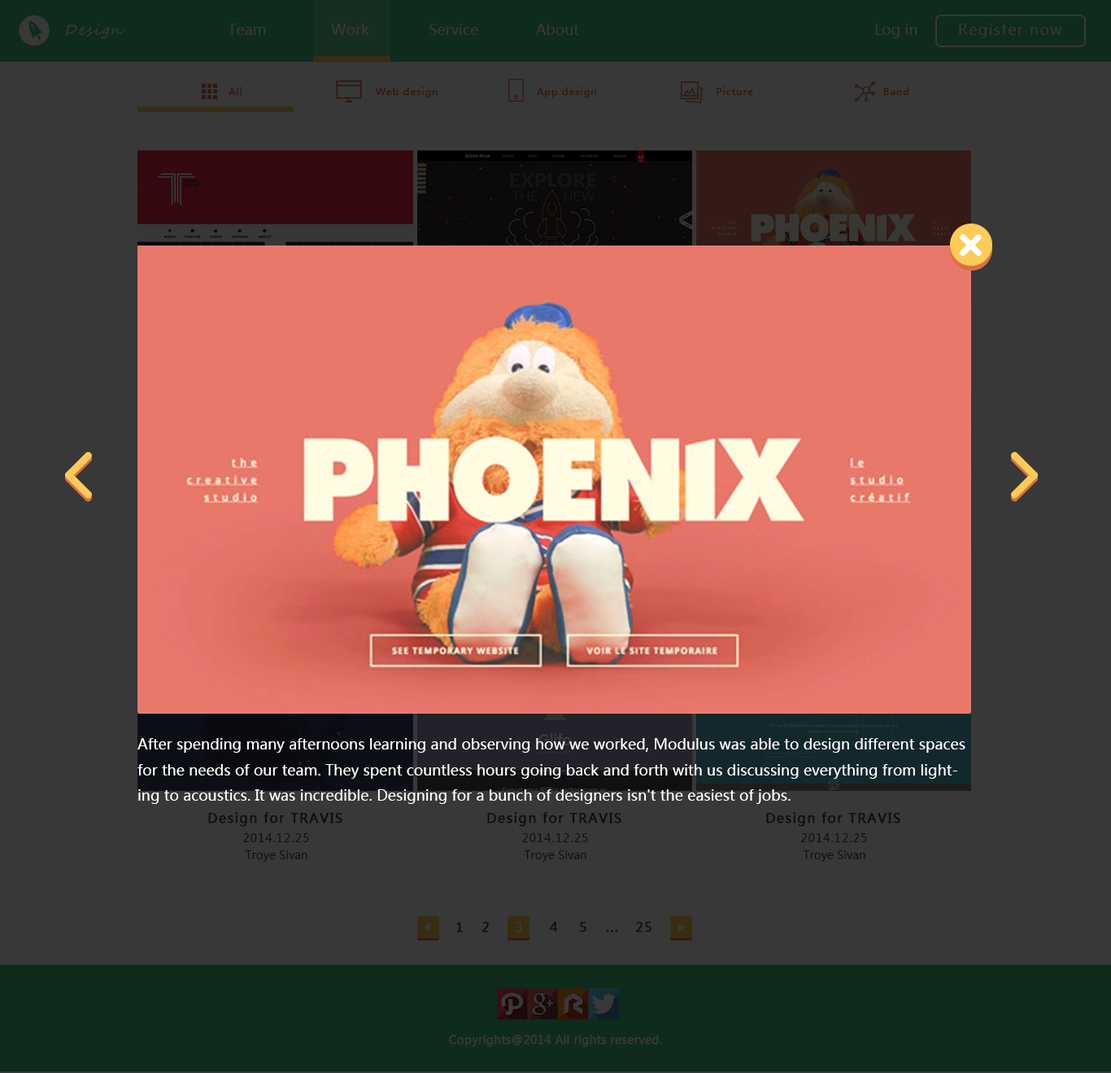
<style>
.page{position:relative;width:1111px;height:1073px;background:#383838}
.page>*{position:absolute;margin:0}
.t1{font:14.6px "SegoeScript";letter-spacing:0.075em;color:#383638;font-style:italic}
.t2{font:14.6px "MicrosoftYaHei";color:#383838}
.t3{font:14.6px "MicrosoftYaHei";letter-spacing:0.075em;color:#383638}
.t4{font:9.8px "MicrosoftYaHei";letter-spacing:0.075em;color:#30160b}
.t5{font:14.6px "MicrosoftYaHei";color:#ffffff}
.t6{font:13px "MicrosoftYaHei";letter-spacing:0.075em;color:#0f0e0e;font-weight:bold}
.t7{font:11.4px "MicrosoftYaHei";letter-spacing:0.075em;color:#0f0e0e}
.t8{font:11.4px "MicrosoftYaHei";color:#0f0e0d}
.t9{font:13px "MicrosoftYaHei";letter-spacing:0.075em;color:#101011;font-weight:bold}
.t10{font:13px "MicrosoftYaHei";letter-spacing:0.075em;color:#383838;font-weight:bold}
.t11{font:11.4px "MicrosoftYaHei";color:#383838;font-weight:bold}
</style>
<div class="page">
<p class="t1" style="left:65px;top:24px;width:59px;height:15px">Design</p>
<p class="t2" style="left:228px;top:24px;width:38px;height:11px">Team</p>
<p class="t2" style="left:331px;top:24px;width:38px;height:11px">Work</p>
<p class="t2" style="left:429px;top:24px;width:49px;height:11px">Service</p>
<p class="t2" style="left:536px;top:24px;width:43px;height:11px">About</p>
<p class="t2" style="left:875px;top:24px;width:42px;height:14px">Log in</p>
<p class="t3" style="left:959px;top:24px;width:103px;height:14px">Register now</p>
<p class="t4" style="left:229px;top:87px;width:13px;height:8px">All</p>
<p class="t4" style="left:376px;top:87px;width:62px;height:11px">Web design</p>
<p class="t4" style="left:537px;top:87px;width:59px;height:11px">App design</p>
<p class="t4" style="left:716px;top:87px;width:37px;height:8px">Picture</p>
<p class="t4" style="left:884px;top:87px;width:24px;height:8px">Band</p>
<p class="t5" style="left:137px;top:738px;width:828px;height:66px">After spending many afternoons learning and observing how we worked, Modulus was able to design different spaces for the needs of our team. They spent countless hours going back and forth with us discussing everything from lighting to acoustics. It was incredible. Designing for a bunch of designers isn't the easiest of jobs.</p>
<p class="t6" style="left:208px;top:812px;width:134px;height:15px">Design for TRAVIS</p>
<p class="t6" style="left:487px;top:812px;width:134px;height:15px">Design for TRAVIS</p>
<p class="t6" style="left:766px;top:812px;width:134px;height:15px">Design for TRAVIS</p>
<p class="t7" style="left:243px;top:834px;width:66px;height:8px">2014.12.25</p>
<p class="t7" style="left:522px;top:834px;width:66px;height:8px">2014.12.25</p>
<p class="t7" style="left:801px;top:834px;width:66px;height:8px">2014.12.25</p>
<p class="t8" style="left:245px;top:851px;width:62px;height:11px">Troye Sivan</p>
<p class="t8" style="left:524px;top:851px;width:62px;height:11px">Troye Sivan</p>
<p class="t8" style="left:803px;top:851px;width:62px;height:11px">Troye Sivan</p>
<p class="t9" style="left:456px;top:922px;width:7px;height:11px">1</p>
<p class="t9" style="left:481px;top:922px;width:8px;height:11px">2</p>
<p class="t10" style="left:516px;top:922px;width:6px;height:11px">3</p>
<p class="t9" style="left:550px;top:922px;width:8px;height:11px">4</p>
<p class="t9" style="left:580px;top:922px;width:6px;height:11px">5</p>
<p class="t9" style="left:635px;top:922px;width:16px;height:11px">25</p>
<p class="t9" style="left:606px;top:930px;width:12px;height:3px">...</p>
<p class="t11" style="left:449px;top:1035px;width:213px;height:12px">Copyrights@2014 All rights reserved.</p>
</div>
